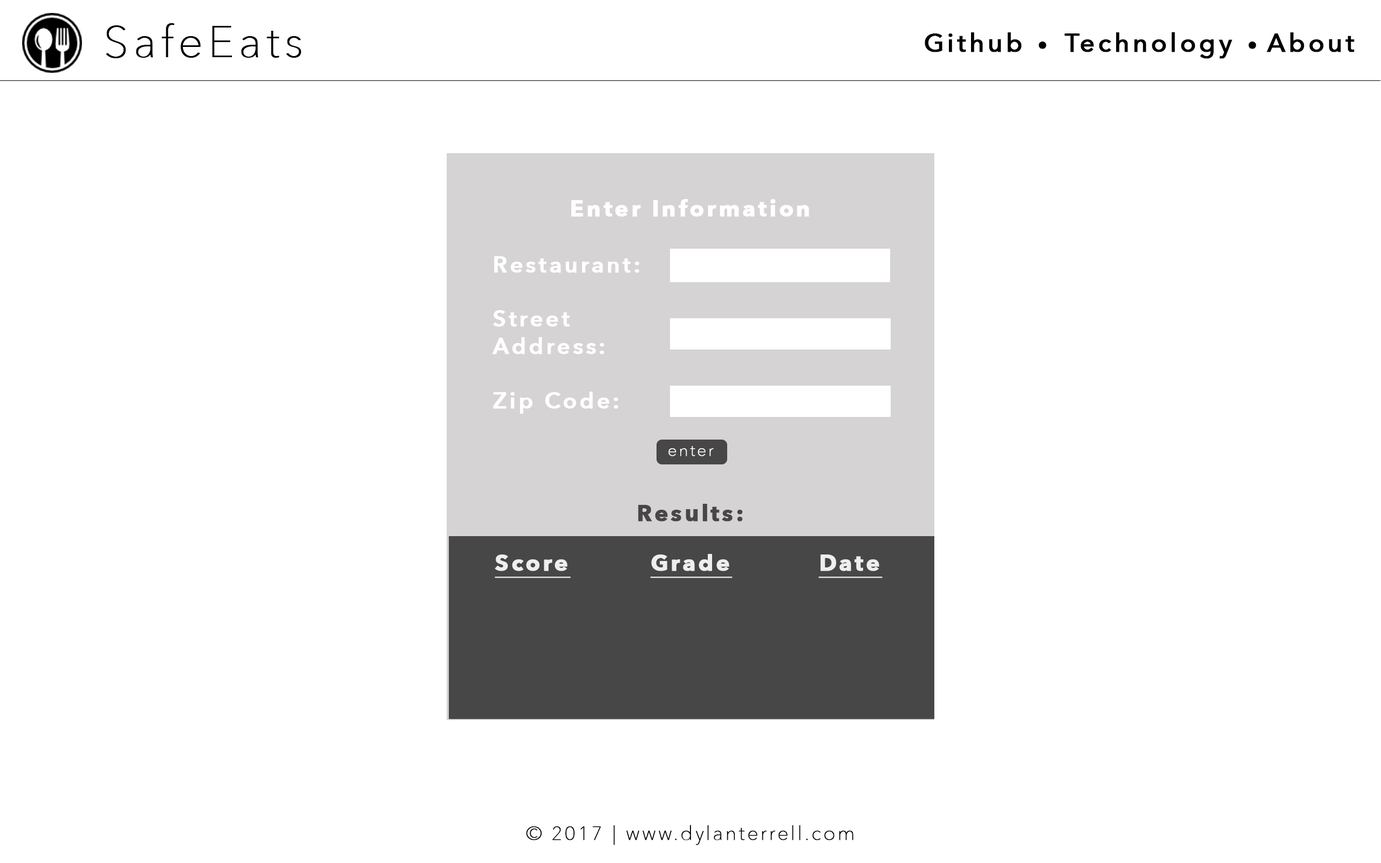
<style>
.page{position:relative;width:1381px;height:863px;background:#ffffff}
.page>*{position:absolute;margin:0}
.t1{font:43.2px "AvenirNext-UltraLight";letter-spacing:0.1em;color:#000000;font-weight:bold}
.t2{font:25.9px "AvenirNext-Medium";letter-spacing:0.1em;color:#000000;font-weight:bold}
.t3{font:19.4px "AvenirNext-UltraLight";letter-spacing:0.1em;color:#000000;font-weight:bold}
.t4{font:22.7px "AvenirNext-Bold";letter-spacing:0.1em;color:#ffffff;font-weight:bold}
.t5{font:22.7px "AvenirNext-DemiBold";letter-spacing:0.1em;color:#ffffff;font-weight:bold}
.t6{font:16.2px "AvenirNext-UltraLight";letter-spacing:0.1em;color:#ffffff;font-weight:bold}
.t7{font:22.7px "AvenirNext-Bold";letter-spacing:0.1em;color:#474747;font-weight:bold}
.t8{font:22.7px "AvenirNext-Bold";letter-spacing:0.1em;color:#eeeeee;font-weight:bold;text-decoration:underline}
</style>
<div class="page">
<p class="t1" style="left:106px;top:23px;width:196px;height:35px">SafeEats</p>
<p class="t2" style="left:925px;top:32px;width:430px;height:27px">Github <span class="t3">•  </span>Technology <span class="t3">• </span>About</p>
<p class="t4" style="left:571px;top:199px;width:238px;height:18px">Enter Information</p>
<p class="t5" style="left:492px;top:256px;width:147px;height:158px">Restaurant:<br><br>Street <br>Address:<br><br>Zip Code:</p>
<p class="t6" style="left:669px;top:446px;width:45px;height:10px">enter</p>
<p class="t7" style="left:638px;top:504px;width:105px;height:18px">Results:</p>
<p class="t8" style="left:495px;top:555px;width:76px;height:23px">Score</p>
<p class="t8" style="left:650px;top:554px;width:83px;height:24px">Grade</p>
<p class="t8" style="left:819px;top:555px;width:64px;height:23px">Date</p>
<p class="t3" style="left:526px;top:825px;width:328px;height:20px">© 2017 | www.dylanterrell.com</p>
</div>
